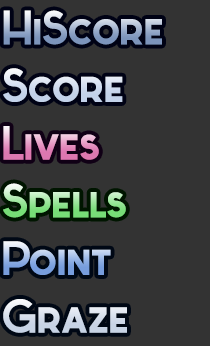
<style>
.page{position:relative;width:210px;height:346px;background:#333333}
.page>*{position:absolute;margin:0}
.t1{font:48px "Sabado"}
.t2{font:48px "Sabado";color:#cdd9ed}
.t3{font:48px "Sabado";color:#cfd8e8}
</style>
<div class="page">
<p class="t1" style="left:3px;top:10px;width:159px;height:35px">HiScore</p>
<p class="t2" style="left:3px;top:68px;width:120px;height:34px">Score</p>
<p class="t1" style="left:3px;top:126px;width:96px;height:34px">Lives</p>
<p class="t1" style="left:3px;top:183px;width:123px;height:35px">Spells</p>
<p class="t1" style="left:3px;top:241px;width:108px;height:34px">Point</p>
<p class="t3" style="left:3px;top:299px;width:124px;height:34px">Graze</p>
</div>
